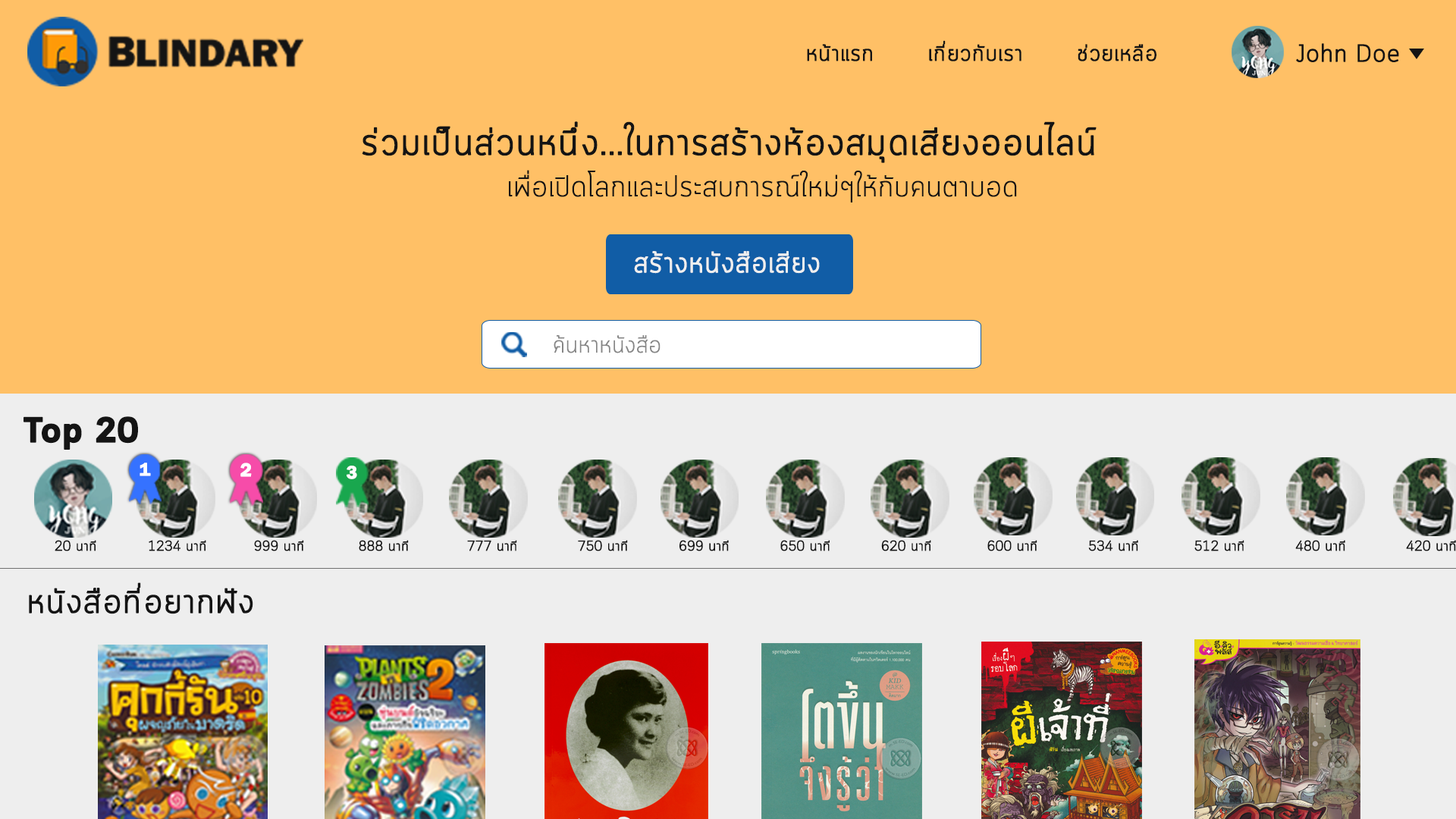
<style>
.page{position:relative;width:1456px;height:819px;background:#ffc066}
.page>*{position:absolute;margin:0}
.t1{font:22.7px "Cloud-Light";color:#141414;font-weight:bold}
.t2{font:24.2px "Cloud-Light";color:#141414;font-weight:bold}
.t3{font:37.9px "Cloud-Light";color:#141414;font-weight:bold}
.t4{font:30.3px "Cloud-Light";color:#141414}
.t5{font:29.2px "Cloud-Light";color:#efefef;font-weight:bold}
.t6{font:24.4px "Cloud-Light";color:#868686}
.t7{font:35.1px "Cloud-Bold";color:#141414;font-weight:bold}
.t8{font:18.5px "FranklinGothic-Demi";color:#fefeff;font-weight:bold}
.t9{font:19.1px "FranklinGothic-Demi";color:#fefeff;font-weight:bold}
.t10{font:14.1px "Cloud-Light";color:#141414;font-weight:bold}
.t11{font:34.5px "Cloud-Light";color:#141414;font-weight:bold}
</style>
<div class="page">
<p class="t1" style="left:807px;top:40px;width:349px;height:21px">หน้าแรก       เกี่ยวกับเรา       ช่วยเหลือ</p>
<p class="t2" style="left:1296px;top:43px;width:103px;height:19px">John Doe</p>
<p class="t3" style="left:362px;top:121px;width:735px;height:42px">ร่วมเป็นส่วนหนึ่ง...ในการสร้างห้องสมุดเสียงออนไลน์</p>
<p class="t4" style="left:509px;top:170px;width:508px;height:32px">เพื่อเปิดโลกและประสบการณ์ใหม่ๆให้กับคนตาบอด</p>
<p class="t5" style="left:634px;top:251px;width:186px;height:23px">สร้างหนังสือเสียง</p>
<p class="t6" style="left:554px;top:335px;width:106px;height:18px">ค้นหาหนังสือ</p>
<p class="t7" style="left:24px;top:416px;width:114px;height:34px">Top 20</p>
<p class="t8" style="left:140px;top:463px;width:11px;height:13px">1</p>
<p class="t9" style="left:240px;top:463px;width:12px;height:14px">2</p>
<p class="t8" style="left:347px;top:466px;width:10px;height:13px">3</p>
<p class="t10" style="left:55px;top:540px;width:41px;height:11px">20 นาที</p>
<p class="t10" style="left:149px;top:540px;width:57px;height:11px">1234 นาที</p>
<p class="t10" style="left:254px;top:540px;width:50px;height:11px">999 นาที</p>
<p class="t10" style="left:359px;top:540px;width:50px;height:11px">888 นาที</p>
<p class="t10" style="left:467px;top:540px;width:989px;height:11px">777 นาที   750 นาที   699 นาที   650 นาที   620 นาที    600 นาที    534 นาที     512 นาที     480 นาที       420 นาที</p>
<p class="t11" style="left:29px;top:582px;width:224px;height:32px">หนังสือที่อยากฟัง</p>
</div>
